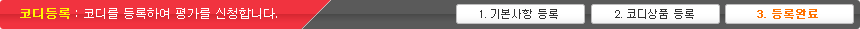
<style>
.page{position:relative;width:860px;height:29px;background:#5a5a5a}
.page>*{position:absolute;margin:0}
.t1{font:12px "Dotum";color:#ffffff}
.t2{font:12px "Dotum";color:#fff600;font-weight:bold}
.t3{font:12px "morris9";color:#323232;scale:0.96 1}
.t4{font:12px "morris9";color:#ff7200;font-weight:bold;scale:0.96 1}
</style>
<div class="page">
<p class="t1" style="left:20px;top:8px;width:257px;height:11px"><span class="t2"> 코디등록</span> : 코디를 등록하여 평가를 신청합니다.</p>
<p class="t3" style="left:480px;top:9px;width:78px;height:10px">1. 기본사항 등록</p>
<p class="t3" style="left:615px;top:9px;width:79px;height:10px">2. 코디상품 등록</p>
<p class="t4" style="left:757px;top:9px;width:61px;height:10px">3. 등록완료</p>
</div>
